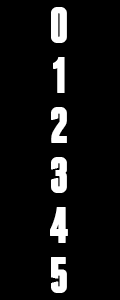
<style>
.page{position:relative;width:120px;height:300px;background:#000000}
.page>*{position:absolute;margin:0}
.t1{font:50px "Franchise-Bold";color:#ffffff;font-weight:bold}
</style>
<div class="page">
<p class="t1" style="left:51px;top:7px;width:16px;height:36px">0</p>
<p class="t1" style="left:53px;top:57px;width:12px;height:36px">1</p>
<p class="t1" style="left:51px;top:107px;width:16px;height:36px">2</p>
<p class="t1" style="left:51px;top:157px;width:16px;height:36px">3</p>
<p class="t1" style="left:50px;top:207px;width:18px;height:36px">4</p>
<p class="t1" style="left:51px;top:257px;width:16px;height:36px">5</p>
</div>
